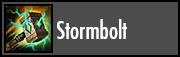
<style>
.page{position:relative;width:180px;height:57px;background:#4c4c4c}
.page>*{position:absolute;margin:0}
.t1{font:24px "FuturaCondensed";color:#ffffff}
</style>
<div class="page">
<p class="t1" style="left:57px;top:19px;width:70px;height:20px">Stormbolt</p>
</div>
